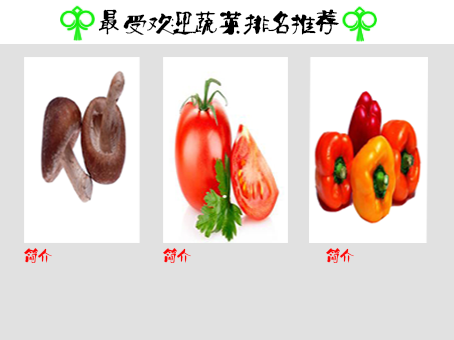
<style>
.page{position:relative;width:454px;height:340px;background:#e1e1e1}
.page>*{position:absolute;margin:0}
.t1{font:23.8px "Ò¶¸ùÓÑÌØÉ«¼òÌåÉý¼¶°æ";color:#000000}
.t2{font:14px "Ò¶¸ùÓÑÌØÉ«¼òÌåÉý¼¶°æ";color:#fc0606}
</style>
<div class="page">
<p class="t1" style="left:98px;top:9px;width:241px;height:26px">最受欢迎蔬菜排名推荐</p>
<p class="t2" style="left:24px;top:248px;width:28px;height:15px">简介</p>
<p class="t2" style="left:163px;top:248px;width:28px;height:15px">简介</p>
<p class="t2" style="left:326px;top:248px;width:28px;height:15px">简介</p>
</div>
